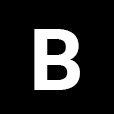
<style>
.page{position:relative;width:114px;height:114px;background:#000000}
.page>*{position:absolute;margin:0}
.t1{font:85.7px "Roboto-Bold";color:#ffffff;text-transform:uppercase}
</style>
<div class="page">
<p class="t1" style="left:34px;top:29px;width:46px;height:61px">B</p>
</div>
